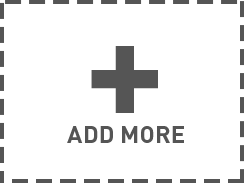
<style>
.page{position:relative;width:244px;height:183px;background:#ffffff}
.page>*{position:absolute;margin:0}
.t1{font:150px "DINPro-Bold";color:#555555}
.t2{font:24px "DINPro-Bold";color:#555555}
</style>
<div class="page">
<p class="t1" style="left:91px;top:46px;width:67px;height:67px">+</p>
<p class="t2" style="left:67px;top:126px;width:117px;height:17px">ADD MORE</p>
</div>
